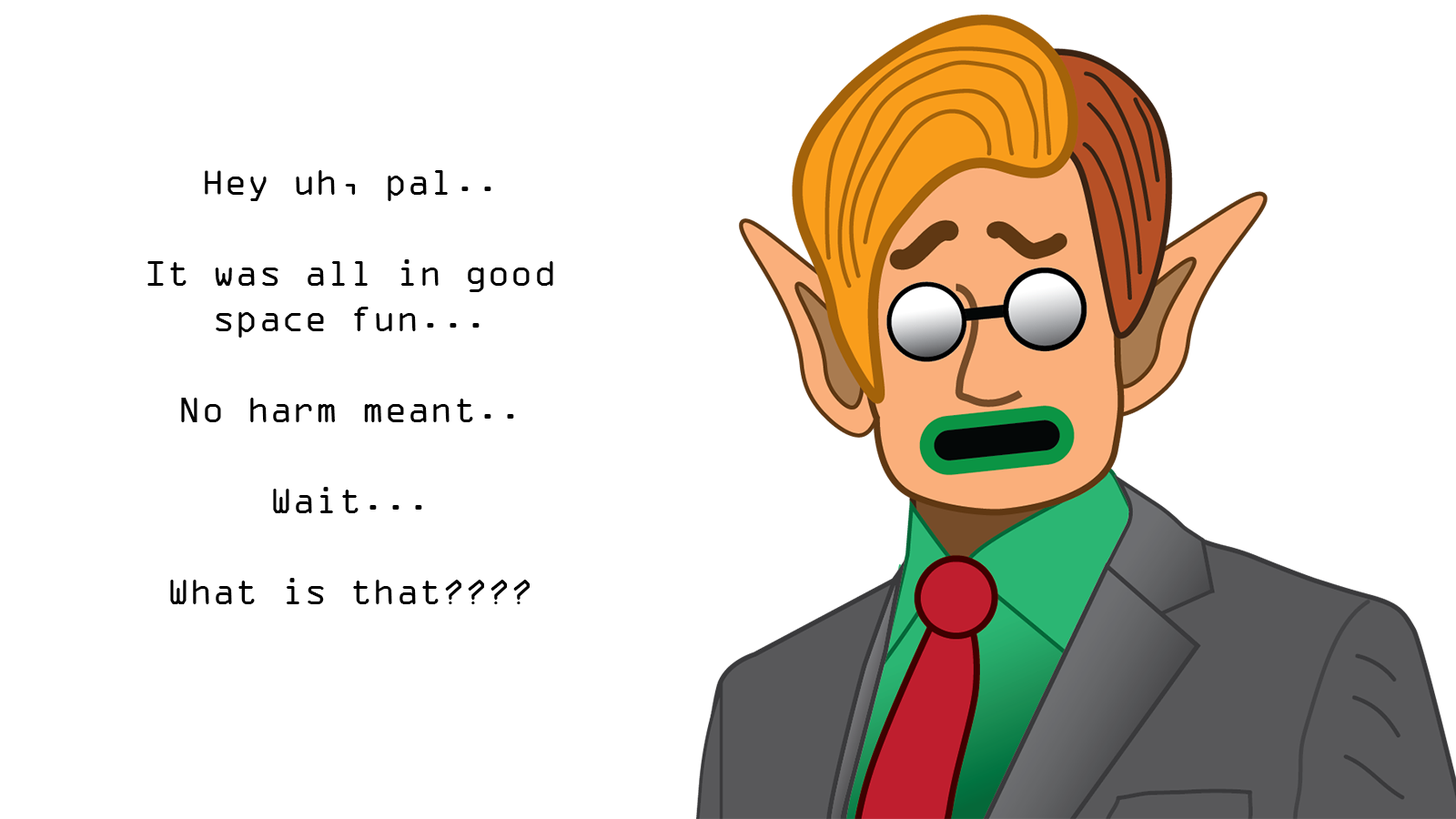
<style>
.page{position:relative;width:1456px;height:819px;background:#ffffff}
.page>*{position:absolute;margin:0}
.t1{font:37.9px "OCRAExtended";color:#000000}
</style>
<div class="page">
<p class="t1" style="left:147px;top:170px;width:406px;height:434px;text-align:center">Hey uh, pal..<br><br>It was all in good space fun...<br><br>No harm meant..<br><br>Wait...<br><br>What is that????</p>
</div>
